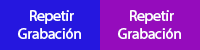
<style>
.page{position:relative;width:200px;height:50px;background:#950cbc}
.page>*{position:absolute;margin:0}
.t1{font:15px "MyriadHebrew-Regular";color:#ffffff}
</style>
<div class="page">
<p class="t1" style="left:18px;top:10px;width:63px;height:29px;text-align:center">Repetir <br>Grabación</p>
<p class="t1" style="left:118px;top:10px;width:63px;height:29px;text-align:center">Repetir <br>Grabación</p>
</div>
